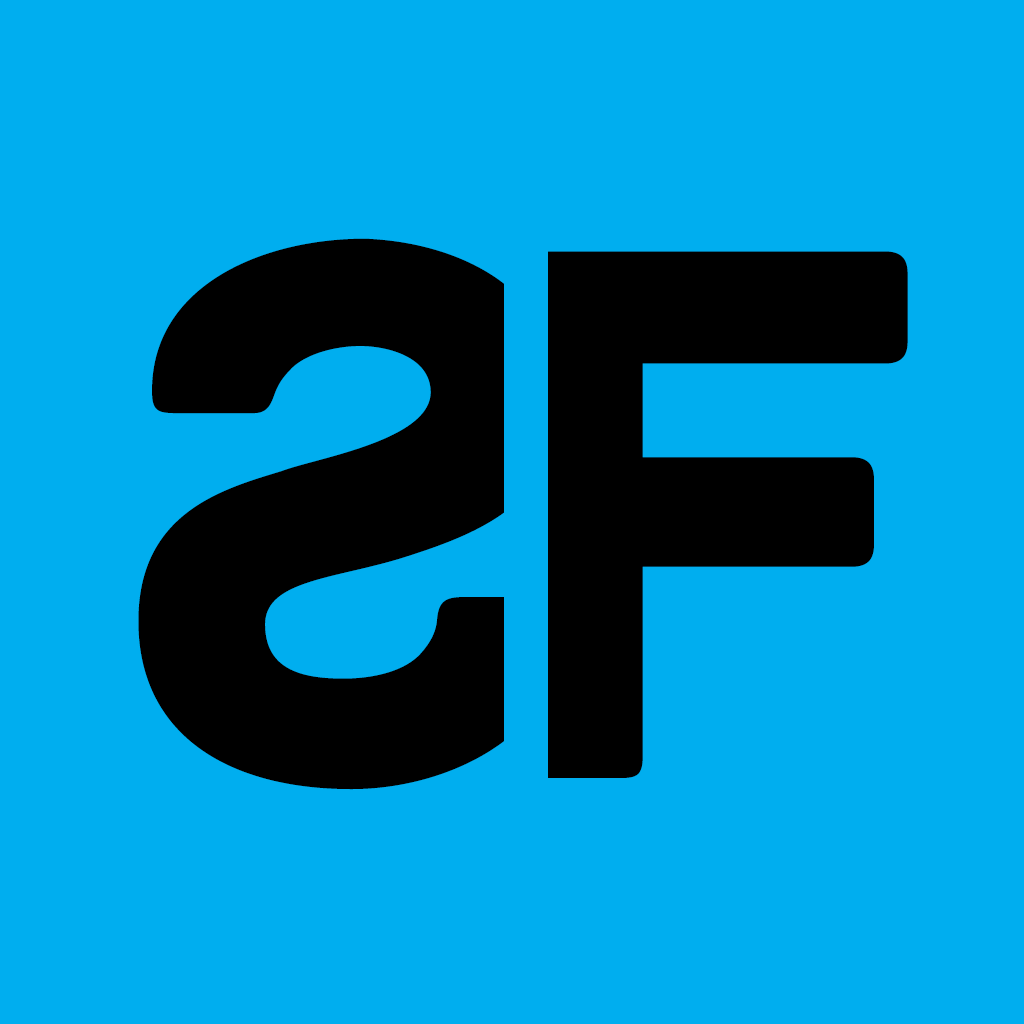
<style>
.page{position:relative;width:1024px;height:1024px;background:#00aeef}
.page>*{position:absolute;margin:0}
.t1{font:799.6px "Archive";color:#000000}
.t2{font:800px "Archive";color:#000000}
</style>
<div class="page">
<p class="t1" style="left:138px;top:238px;width:429px;height:552px;rotate:180deg">S</p>
<p class="t2" style="left:517px;top:251px;width:391px;height:527px">F</p>
</div>
